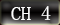
<style>
.page{position:relative;width:60px;height:25px}
.page>*{position:absolute;margin:0}
.t1{font:20px "SimSun";color:#ffffff}
</style>
<div class="page">
<p class="t1" style="left:11px;top:6px;width:40px;height:14px">CH 4</p>
</div>
